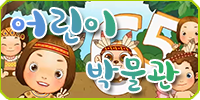
<style>
.page{position:relative;width:200px;height:100px}
.page>*{position:absolute;margin:0}
.t1{font:46.7px "TypoMoonFlowerB";letter-spacing:0.02em}
.t2{font:36.7px "TypoMoonFlowerB";letter-spacing:0.02em}
</style>
<div class="page">
<p class="t1" style="left:12px;top:8px;width:168px;height:84px">어린이 <br><span class="t2">       박물관</span></p>
</div>
